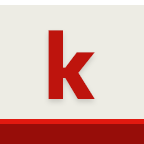
<style>
.page{position:relative;width:144px;height:144px;background:#edece4}
.page>*{position:absolute;margin:0}
.t1{font:88px "Exo-Extra-Bold";color:#be140d}
</style>
<div class="page">
<p class="t1" style="left:48px;top:30px;width:47px;height:69px">k</p>
</div>
